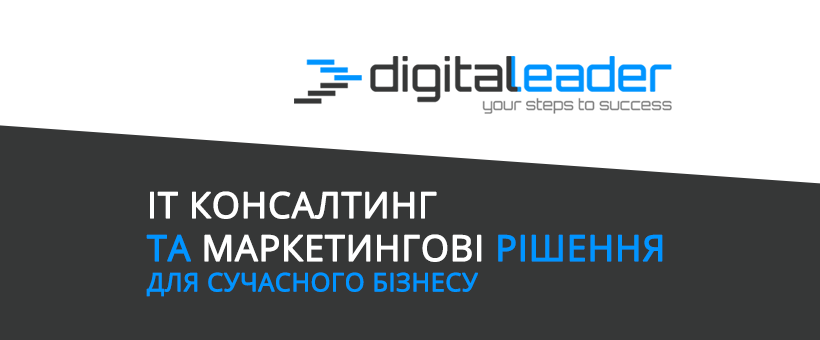
<style>
.page{position:relative;width:820px;height:340px;background:#363737}
.page>*{position:absolute;margin:0}
.t1{font:25.2px "OpenSans";color:#0094ff;text-transform:uppercase;font-weight:bold}
.t2{font:35.8px "OpenSans";color:#ffffff;text-transform:uppercase;font-weight:bold}
.t3{font:35.8px "OpenSans";color:#0094ff;text-transform:uppercase;font-weight:bold}
</style>
<div class="page">
<p class="t1" style="left:146px;top:191px;width:517px;height:106px"><span class="t2">ІТ консалтинг <br></span><span class="t3">та</span><span class="t2"> маркетингові </span><span class="t3">рішення <br></span>для сучасного бізнесу</p>
</div>
